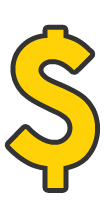
<style>
.page{position:relative;width:105px;height:205px;background:#ffffff}
.page>*{position:absolute;margin:0}
.t1{font:170px "CenturyGothic-Bold";color:#ffd107}
</style>
<div class="page">
<p class="t1" style="left:9px;top:29px;width:86px;height:159px">$</p>
</div>
